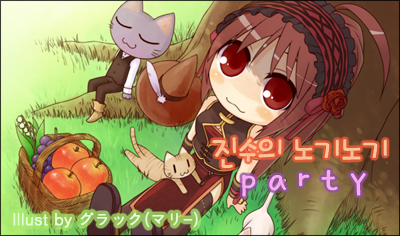
<style>
.page{position:relative;width:400px;height:236px}
.page>*{position:absolute;margin:0}
.t1{font:38px "Dgyoung";color:#fcc49b}
.t2{font:38px "Dgyoung";color:#f396e0}
.t3{font:16px "Dotum";color:#e6ffdf;font-weight:bold}
</style>
<div class="page">
<p class="t1" style="left:212px;top:137px;width:175px;height:31px">진수의 노기노기</p>
<p class="t2" style="left:242px;top:170px;width:124px;height:27px">p a r t y</p>
<p class="t3" style="left:13px;top:211px;width:185px;height:17px">Illust by グラック(マリ-)</p>
</div>
